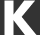
<style>
.page{position:relative;width:40px;height:35px;background:#333333}
.page>*{position:absolute;margin:0}
.t1{font:51.9px "Aharoni-Bold";color:#ffffff}
</style>
<div class="page">
<p class="t1" style="left:4px;top:0px;width:33px;height:35px">K</p>
</div>
